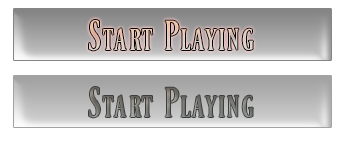
<style>
.page{position:relative;width:340px;height:143px;background:#ffffff}
.page>*{position:absolute;margin:0}
.t1{font:36px "Ferrum";color:#e2cebe}
.t2{font:36px "Ferrum"}
</style>
<div class="page">
<p class="t1" style="left:89px;top:20px;width:164px;height:31px">Start Playing</p>
<p class="t2" style="left:89px;top:87px;width:164px;height:31px">Start Playing</p>
</div>
